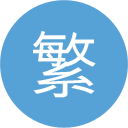
<style>
.page{position:relative;width:128px;height:128px;background:#56a1d5}
.page>*{position:absolute;margin:0}
.t1{font:72px "MicrosoftMHei";color:#ffffff}
</style>
<div class="page">
<p class="t1" style="left:33px;top:31px;width:63px;height:67px">繁</p>
</div>
